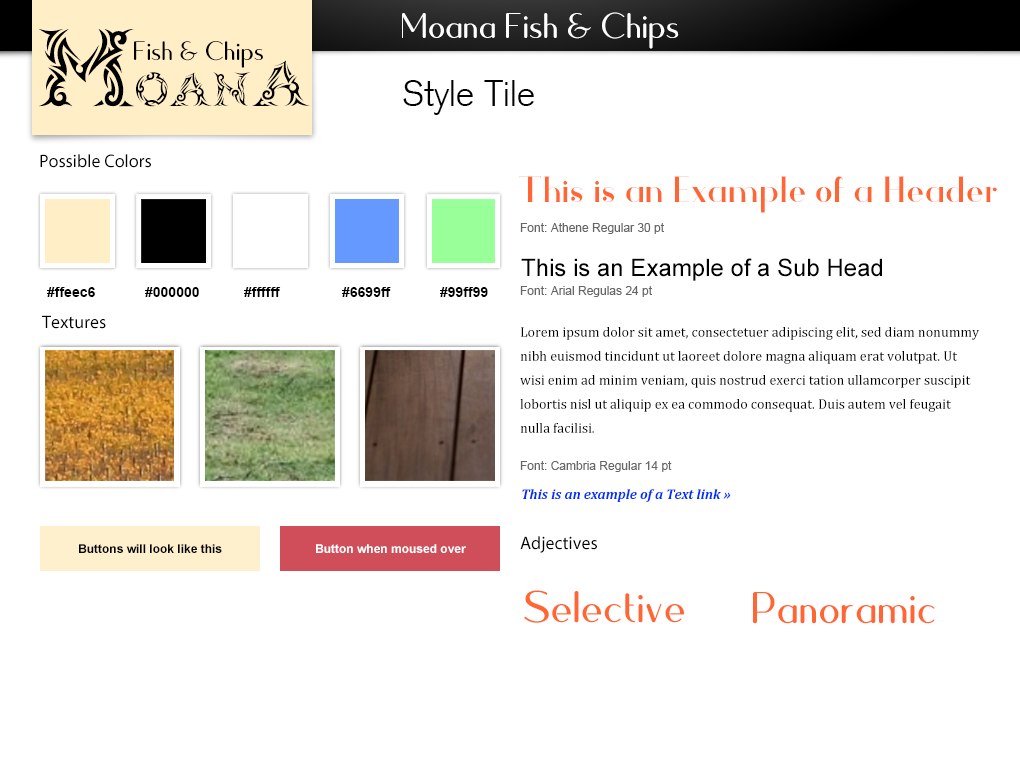
<style>
.page{position:relative;width:1020px;height:760px;background:#ffffff}
.page>*{position:absolute;margin:0}
.t1{font:48px "Quesha";color:#ffffff}
.t2{font:48px "Tribalcase";color:#000000}
.t3{font:110px "Tribalcase";color:#000000}
.t4{font:65px "Tribalcase";color:#000000}
.t5{font:36px "Quesha";color:#000000}
.t6{font:36px "AkzidenzGroteskCE-Light";color:#000000}
.t7{font:18px "MyriadPro-Regular";color:#000000}
.t8{font:30px "Athene";color:#ff6633}
.t9{font:12px "ArialMT";color:#666666}
.t10{font:24px "ArialMT";color:#000000}
.t11{font:14px "Arial-BoldMT";color:#000000}
.t12{font:14px/24px "Cambria";color:#000000}
.t13{font:14px "Cambria-BoldItalic";color:#0033ff}
.t14{font:12px "Arial-BoldMT";color:#000000}
.t15{font:12px "Arial-BoldMT";color:#ffffff}
.t16{font:60px "Quesha";color:#ff6633}
</style>
<div class="page">
<p class="t1" style="left:402px;top:12px;width:277px;height:37px">Moana Fish &amp; Chips</p>
<p class="t2" style="left:39px;top:29px;width:271px;height:78px"><span class="t3">M</span>oan<span class="t4">a</span></p>
<p class="t5" style="left:134px;top:41px;width:129px;height:27px">Fish &amp; Chips</p>
<p class="t6" style="left:403px;top:80px;width:131px;height:35px">Style Tile</p>
<p class="t7" style="left:40px;top:154px;width:111px;height:14px">Possible Colors</p>
<p class="t8" style="left:519px;top:176px;width:478px;height:37px">This is an Example of a Header</p>
<p class="t9" style="left:520px;top:223px;width:144px;height:11px">Font: Athene Regular 30 pt</p>
<p class="t10" style="left:521px;top:258px;width:361px;height:23px">This is an Example of a Sub Head</p>
<p class="t11" style="left:47px;top:287px;width:48px;height:10px">#ffeec6</p>
<p class="t11" style="left:145px;top:287px;width:54px;height:10px">#000000</p>
<p class="t11" style="left:244px;top:287px;width:37px;height:10px">#ffffff</p>
<p class="t11" style="left:342px;top:287px;width:49px;height:10px">#6699ff</p>
<p class="t11" style="left:440px;top:287px;width:48px;height:10px">#99ff99</p>
<p class="t9" style="left:520px;top:286px;width:132px;height:11px">Font: Arial Regulas 24 pt</p>
<p class="t7" style="left:42px;top:315px;width:64px;height:14px">Textures</p>
<p class="t12" style="left:520px;top:327px;width:460px;height:106px">Lorem ipsum dolor sit amet, consectetuer adipiscing elit, sed diam nonummy nibh euismod tincidunt ut laoreet dolore magna aliquam erat volutpat. Ut wisi enim ad minim veniam, quis nostrud exerci tation ullamcorper suscipit lobortis nisl ut aliquip ex ea commodo consequat. Duis autem vel feugait nulla facilisi.</p>
<p class="t9" style="left:520px;top:461px;width:152px;height:11px">Font: Cambria Regular 14 pt</p>
<p class="t13" style="left:522px;top:489px;width:209px;height:13px">This is an example of a Text link »</p>
<p class="t14" style="left:79px;top:544px;width:143px;height:9px">Buttons will look like this</p>
<p class="t15" style="left:316px;top:544px;width:150px;height:9px">Button when moused over</p>
<p class="t7" style="left:520px;top:536px;width:77px;height:17px">Adjectives</p>
<p class="t16" style="left:524px;top:590px;width:160px;height:33px">Selective</p>
<p class="t16" style="left:753px;top:592px;width:182px;height:32px">Panoramic</p>
</div>
